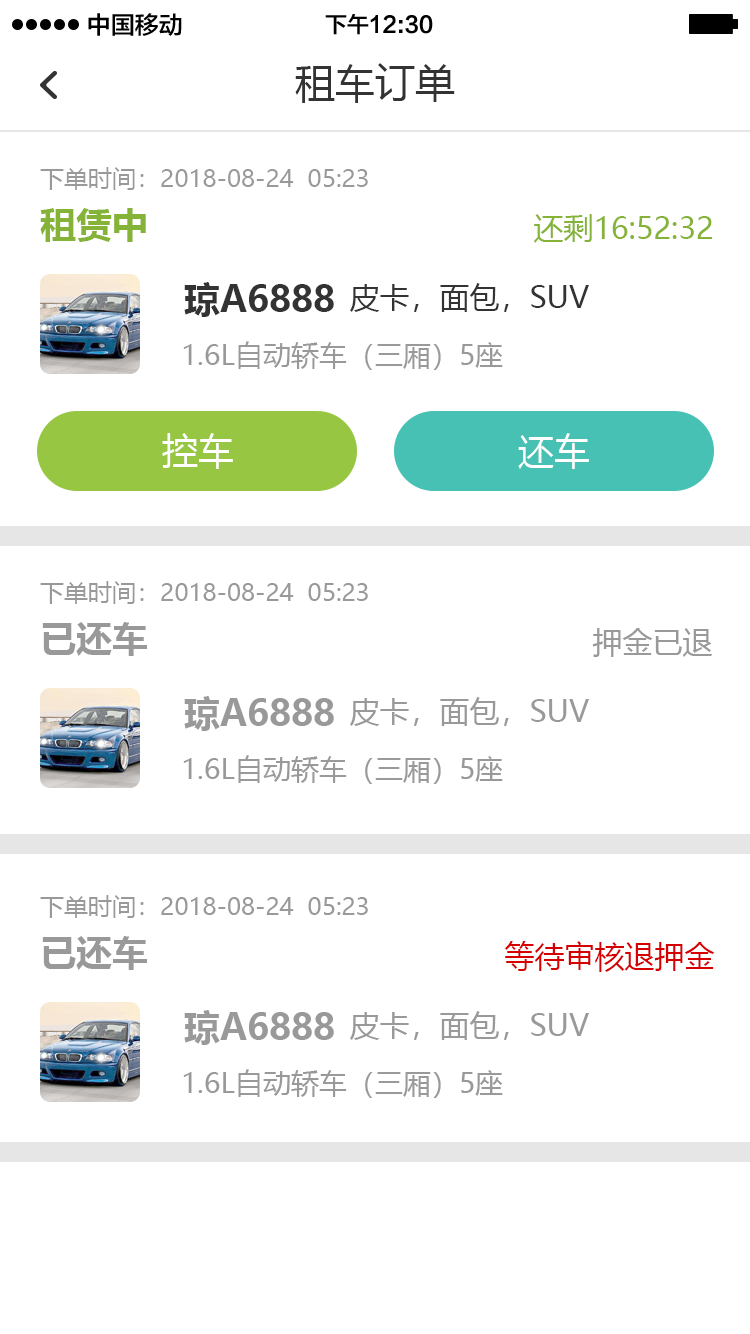
<style>
.page{position:relative;width:750px;height:1334px;background:#ffffff}
.page>*{position:absolute;margin:0}
.t1{font:24px "FZLTZHK--GBK1-0";color:#000000}
.t2{font:22px "FZLTZHK--GBK1-0";color:#000000}
.t3{font:40px "MicrosoftYaHei";color:#333333}
.t4{font:24px "MicrosoftYaHei";color:#999999}
.t5{font:36px "MicrosoftYaHei-Bold";color:#85b338}
.t6{font:30px "MicrosoftYaHei";color:#85b338}
.t7{font:36px "MicrosoftYaHei-Bold";color:#333333}
.t8{font:30px "MicrosoftYaHei";color:#333333}
.t9{font:28px "MicrosoftYaHei";color:#999999}
.t10{font:36px "MicrosoftYaHei";color:#ffffff}
.t11{font:36px "MicrosoftYaHei-Bold";color:#999999}
.t12{font:30px "MicrosoftYaHei";color:#999999}
.t13{font:30px "MicrosoftYaHei";color:#d60000}
</style>
<div class="page">
<p class="t1" style="left:88px;top:13px;width:94px;height:23px">中国移动</p>
<p class="t2" style="left:325px;top:14px;width:108px;height:21px">下午12:30</p>
<p class="t3" style="left:295px;top:63px;width:160px;height:40px">租车订单</p>
<p class="t4" style="left:40px;top:167px;width:328px;height:23px">下单时间：2018-08-24  05:23</p>
<p class="t5" style="left:40px;top:208px;width:106px;height:34px">租赁中</p>
<p class="t6" style="left:534px;top:214px;width:178px;height:29px">还剩16:52:32</p>
<p class="t7" style="left:184px;top:282px;width:150px;height:35px">琼A6888</p>
<p class="t8" style="left:350px;top:283px;width:239px;height:29px">皮卡，面包，SUV</p>
<p class="t9" style="left:183px;top:341px;width:320px;height:29px">1.6L自动轿车（三厢）5座</p>
<p class="t10" style="left:162px;top:433px;width:71px;height:36px">控车</p>
<p class="t10" style="left:518px;top:433px;width:71px;height:36px">还车</p>
<p class="t4" style="left:40px;top:581px;width:328px;height:23px">下单时间：2018-08-24  05:23</p>
<p class="t11" style="left:42px;top:622px;width:105px;height:34px">已还车</p>
<p class="t12" style="left:592px;top:628px;width:120px;height:29px">押金已退</p>
<p class="t11" style="left:184px;top:696px;width:150px;height:35px">琼A6888</p>
<p class="t12" style="left:350px;top:697px;width:239px;height:29px">皮卡，面包，SUV</p>
<p class="t9" style="left:183px;top:755px;width:320px;height:29px">1.6L自动轿车（三厢）5座</p>
<p class="t4" style="left:40px;top:895px;width:328px;height:23px">下单时间：2018-08-24  05:23</p>
<p class="t11" style="left:42px;top:936px;width:105px;height:34px">已还车</p>
<p class="t13" style="left:504px;top:941px;width:211px;height:31px">等待审核退押金</p>
<p class="t11" style="left:184px;top:1010px;width:150px;height:35px">琼A6888</p>
<p class="t12" style="left:350px;top:1011px;width:239px;height:29px">皮卡，面包，SUV</p>
<p class="t9" style="left:183px;top:1069px;width:320px;height:29px">1.6L自动轿车（三厢）5座</p>
</div>
